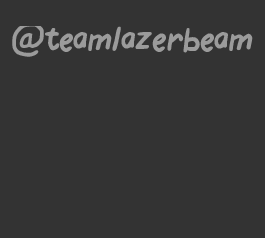
<style>
.page{position:relative;width:265px;height:238px;background:#333333}
.page>*{position:absolute;margin:0}
.t1{font:42.4px "Team_lazerbeam_02";color:#9b9b9b}
</style>
<div class="page">
<p class="t1" style="left:12px;top:26px;width:241px;height:31px">@teamlazerbeam</p>
</div>
